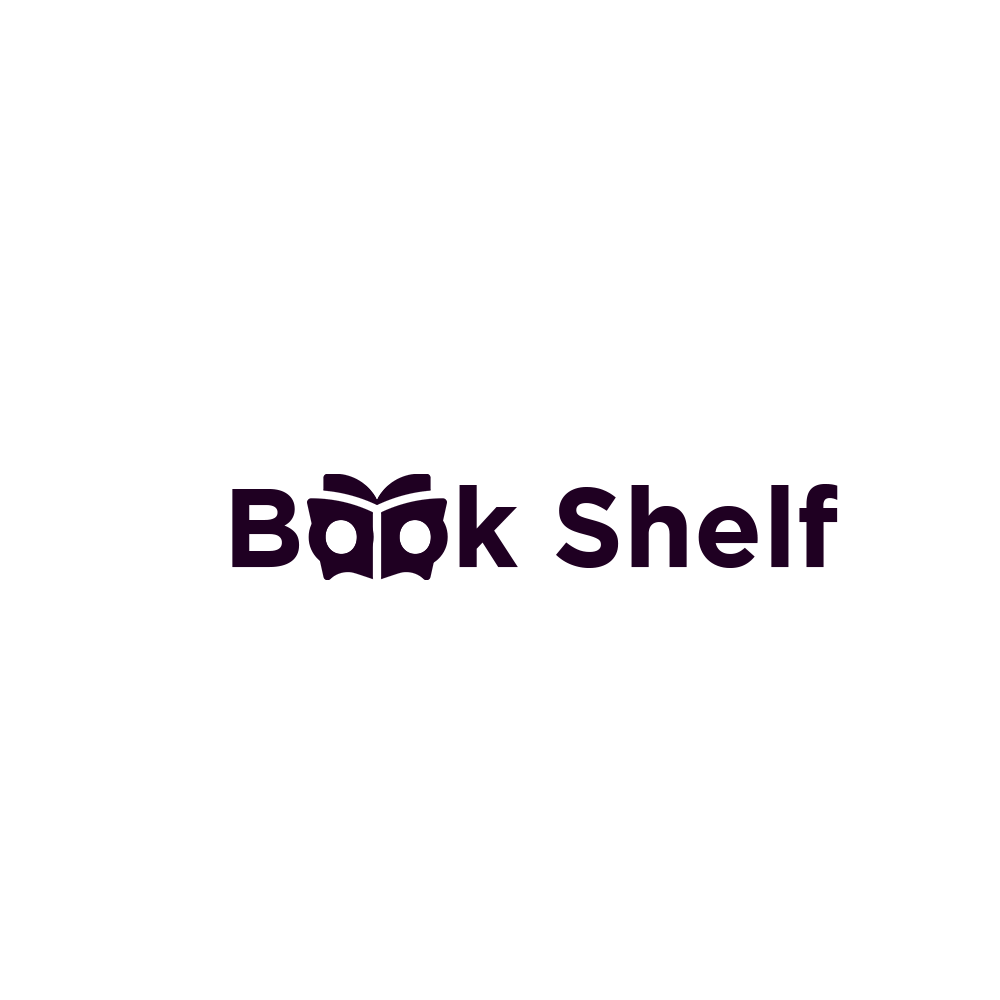
<style>
.page{position:relative;width:1000px;height:1000px;background:#ffffff}
.page>*{position:absolute;margin:0}
.t1{font:112.1px "Gotham-Bold";color:#1f0022}
</style>
<div class="page">
<p class="t1" style="left:232px;top:484px;width:606px;height:84px">Book Shelf</p>
</div>
